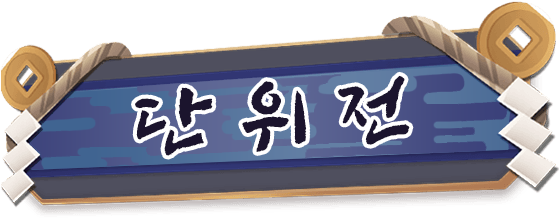
<style>
.page{position:relative;width:560px;height:218px;background:#ffffff}
.page>*{position:absolute;margin:0}
.t1{font:83.4px "SangSangRockOTF";letter-spacing:0.38em;color:#1b142d}
.t2{font:83.4px "SangSangRockOTF";letter-spacing:0.34em;color:#1b142d}
</style>
<div class="page">
<p class="t1" style="left:135px;top:75px;width:275px;height:81px;rotate:-3deg"><span class="t2">단</span>위전</p>
</div>
